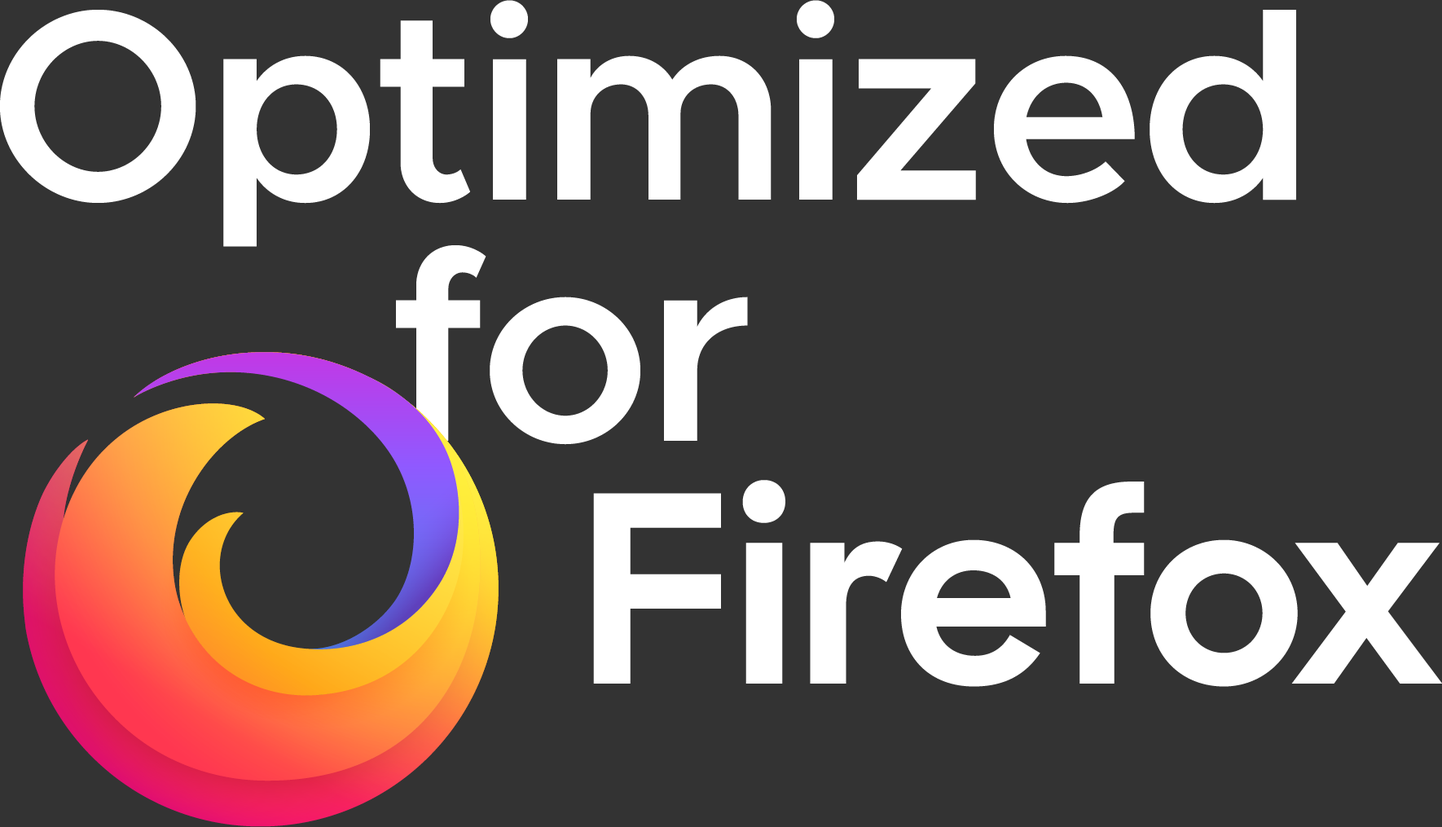
<style>
.page{position:relative;width:1442px;height:827px;background:#333333}
.page>*{position:absolute;margin:0}
.t1{font:271.6px "Metropolis-SemiBold";color:#ffffff}
</style>
<div class="page">
<p class="t1" style="left:0px;top:0px;width:1296px;height:247px">Optimized</p>
<p class="t1" style="left:396px;top:245px;width:352px;height:200px">for</p>
</div>
